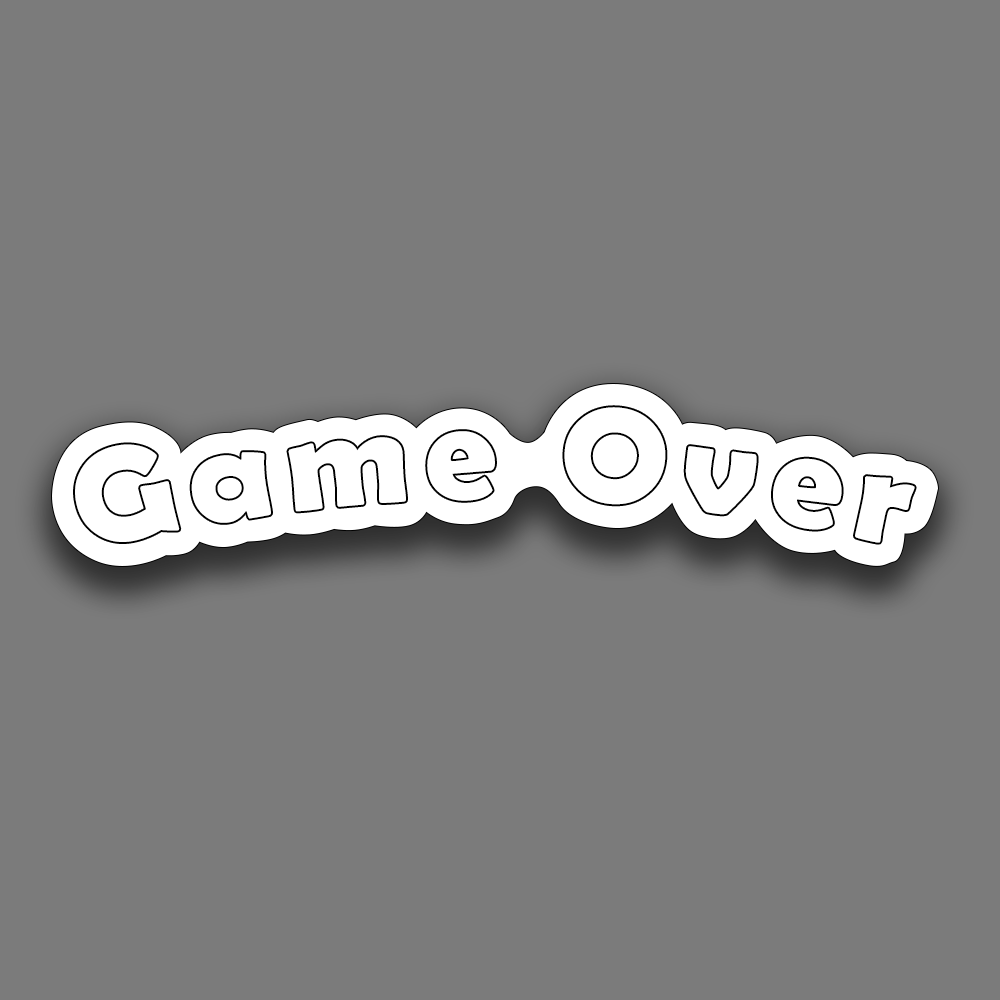
<style>
.page{position:relative;width:1000px;height:1000px;background:#7b7b7b}
.page>*{position:absolute;margin:0}
.t1{font:136.2px "BerlinSansFBDemi-Bold";letter-spacing:0.1em;color:#ffffff}
</style>
<div class="page">
<p class="t1" style="left:75px;top:407px;width:840px;height:136px">Game Over</p>
</div>
